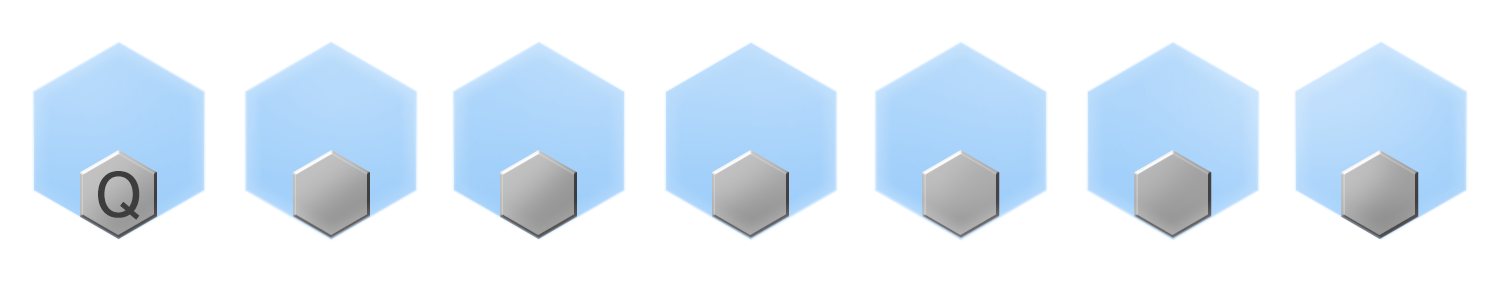
<style>
.page{position:relative;width:1500px;height:300px;background:#ffffff}
.page>*{position:absolute;margin:0}
.t1{font:62.5px "YDIYGO330";letter-spacing:0.04em;color:#3d3d3d}
</style>
<div class="page">
<p class="t1" style="left:98px;top:171px;width:42px;height:49px">Q</p>
</div>
